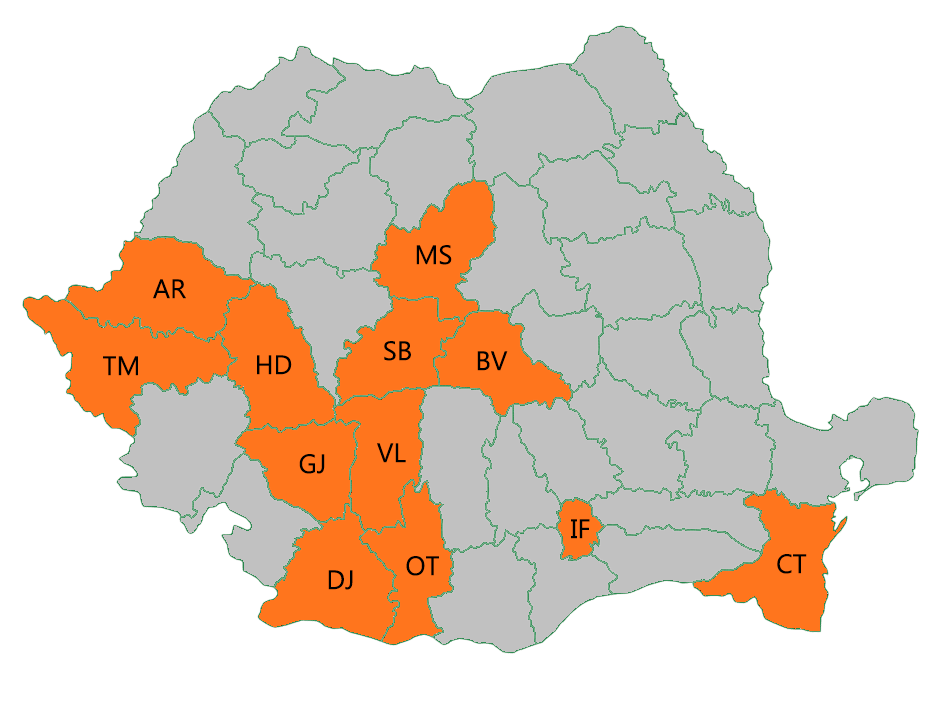
<style>
.page{position:relative;width:937px;height:714px;background:#ffffff}
.page>*{position:absolute;margin:0}
.t1{font:26.7px "Gadugi";color:#000000}
</style>
<div class="page">
<p class="t1" style="left:416px;top:245px;width:36px;height:20px">MS</p>
<p class="t1" style="left:153px;top:279px;width:33px;height:20px">AR</p>
<p class="t1" style="left:384px;top:341px;width:27px;height:20px">SB</p>
<p class="t1" style="left:477px;top:351px;width:31px;height:20px">BV</p>
<p class="t1" style="left:103px;top:356px;width:35px;height:20px">TM</p>
<p class="t1" style="left:257px;top:355px;width:35px;height:20px">HD</p>
<p class="t1" style="left:377px;top:443px;width:29px;height:20px">VL</p>
<p class="t1" style="left:299px;top:454px;width:26px;height:20px">GJ</p>
<p class="t1" style="left:571px;top:519px;width:19px;height:20px">IF</p>
<p class="t1" style="left:406px;top:556px;width:33px;height:20px">OT</p>
<p class="t1" style="left:777px;top:554px;width:30px;height:20px">CT</p>
<p class="t1" style="left:328px;top:570px;width:25px;height:20px">DJ</p>
</div>
